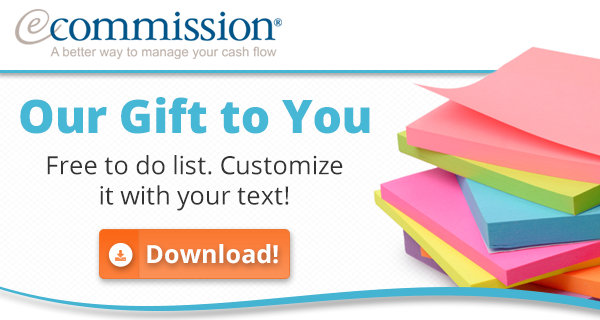
<style>
.page{position:relative;width:600px;height:320px;background:#ffffff}
.page>*{position:absolute;margin:0}
.t1{font:46.2px "OpenSans-Extrabold";color:#46b7d5}
.t2{font:25.4px "OpenSans";color:#333333}
.t3{font:25.1px "OpenSans-Bold";color:#ffffff}
</style>
<div class="page">
<p class="t1" style="left:20px;top:97px;width:350px;height:37px">Our Gift to You</p>
<p class="t2" style="left:47px;top:155px;width:296px;height:56px;text-align:center">Free to do list. Customize<br>it with your text!</p>
<p class="t3" style="left:147px;top:244px;width:131px;height:20px">Download!</p>
</div>
